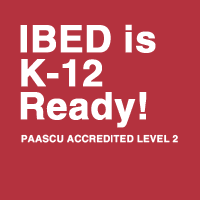
<style>
.page{position:relative;width:200px;height:200px;background:#b4323e}
.page>*{position:absolute;margin:0}
.t1{font:37.5px/33.4px "SwanseaBold";color:#ffffff;font-weight:bold}
.t2{font:9.8px "SwanseaBold";color:#ffffff;text-transform:uppercase;font-weight:bold}
</style>
<div class="page">
<p class="t1" style="left:20px;top:24px;width:136px;height:104px">IBED is<br>K-12<br>Ready!</p>
<p class="t2" style="left:21px;top:134px;width:157px;height:9px">paascu ACCREDITED level 2</p>
</div>
